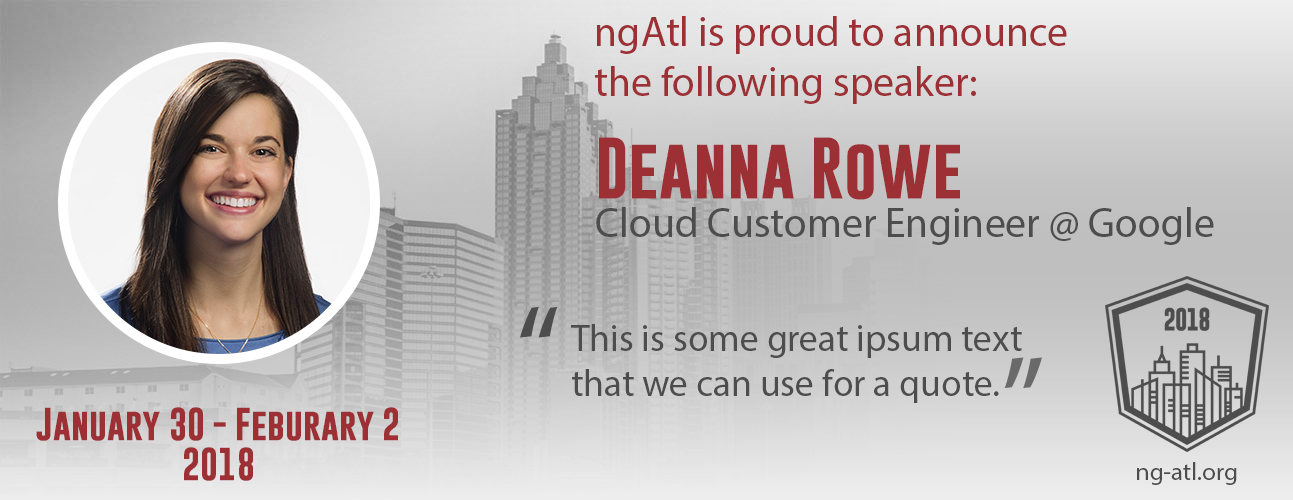
<style>
.page{position:relative;width:1293px;height:500px}
.page>*{position:absolute;margin:0}
.t1{font:41.7px "MyriadPro-Regular";color:#9d3035}
.t2{font:62.5px "GoboldBold";color:#9d3035}
.t3{font:41.7px "MyriadPro-Regular";color:#4d4d4e}
.t4{font:125px "MyriadPro-Regular";color:#4d4d4e}
.t5{font:37.5px "MyriadPro-Regular";color:#4d4d4e}
.t6{font:125px "MyriadPro-Regular";color:#6a6a6b}
.t7{font:33.3px "GoboldBold";color:#9d3035}
.t8{font:25px "MyriadPro-Regular";color:#4d4d4e}
</style>
<div class="page">
<p class="t1" style="left:595px;top:16px;width:472px;height:88px">ngAtl is proud to announce the following speaker:</p>
<p class="t2" style="left:599px;top:137px;width:361px;height:63px">Deanna Rowe</p>
<p class="t3" style="left:596px;top:207px;width:618px;height:38px">Cloud Customer Engineer @ Google</p>
<p class="t4" style="left:520px;top:306px;width:38px;height:32px">“</p>
<p class="t5" style="left:571px;top:324px;width:451px;height:79px">This is some great ipsum text that we can use for a quote.</p>
<p class="t6" style="left:1004px;top:357px;width:38px;height:32px;rotate:180deg">“</p>
<p class="t7" style="left:36px;top:407px;width:362px;height:74px;text-align:center">January 30 - Feburary 2 <br>2018</p>
<p class="t8" style="left:1137px;top:462px;width:100px;height:23px">ng-atl.org</p>
</div>
